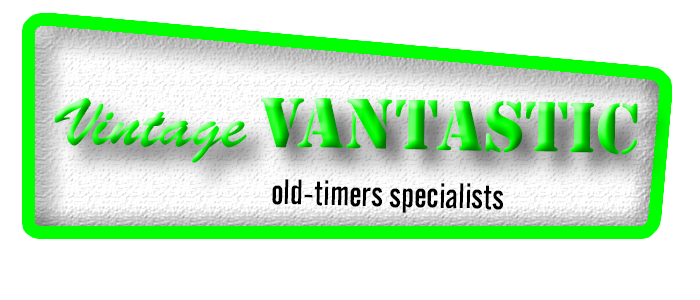
<style>
.page{position:relative;width:700px;height:300px;background:#ffffff}
.page>*{position:absolute;margin:0}
.t1{font:66px "StencilStd"}
.t2{font:66px "BrushScriptStd"}
.t3{font:35px "AlternateGothicNo2BT-Regular";color:#000000}
</style>
<div class="page">
<p class="t1" style="left:54px;top:97px;width:584px;height:66px;rotate:1deg"><span class="t2">Vintage </span>Vantastic</p>
<p class="t3" style="left:272px;top:179px;width:231px;height:34px;rotate:1deg">old-timers specialists</p>
</div>
